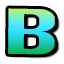
<style>
.page{position:relative;width:64px;height:64px;background:#ffffff}
.page>*{position:absolute;margin:0}
.t1{font:60px "Krungthep";scale:1.54 1}
</style>
<div class="page">
<p class="t1" style="left:8px;top:8px;width:47px;height:47px;rotate:1deg">B</p>
</div>
